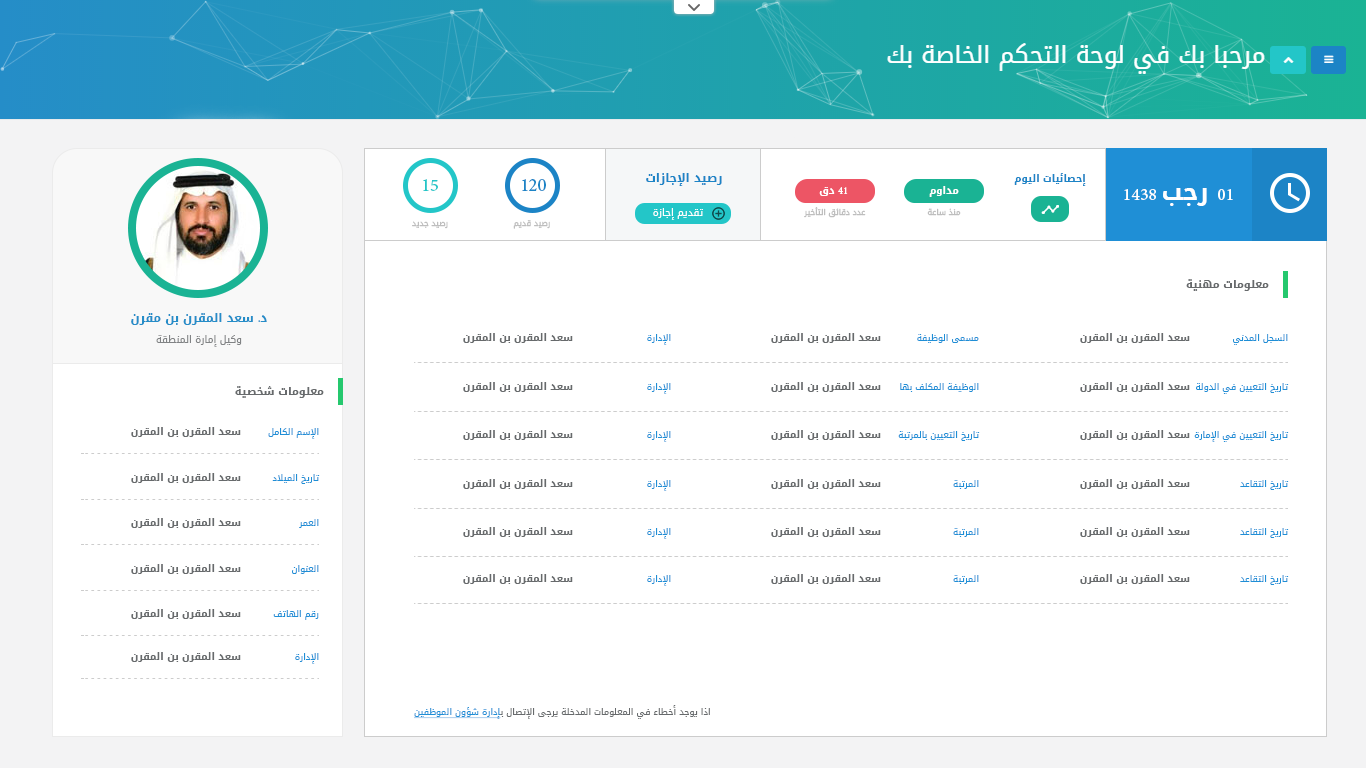
<style>
.page{position:relative;width:1366px;height:768px;background:#ffffff}
.page>*{position:absolute;margin:0}
.t1{font:12px "DroidArabicKufi-Bold";color:#1c84c6}
.t2{font:10px "DroidArabicKufi-Bold";color:#1c84c6}
.t3{font:25px "AdobeArabic-Regular";color:#23c6c8}
.t4{font:25px "AdobeArabic-Regular";color:#1c84c6}
.t5{font:10px "DroidArabicKufi-Bold";color:#ffffff}
.t6{font:14px "AdobeArabic-Regular";color:#ffffff}
.t7{font:24px "AdobeArabic-Regular";color:#ffffff}
.t8{font:24px "DroidArabicKufi-Bold";color:#ffffff}
.t9{font:10px "DroidArabicKufi";color:#ffffff}
.t10{font:8px "DroidArabicKufi";color:#bebebe}
.t11{font:11px "DroidArabicKufi-Bold";color:#676a6c}
.t12{font:12px "DroidArabicKufi-Bold";color:#258dc8}
.t13{font:12px "MyriadPro-Regular";color:#258dc8}
.t14{font:10px "DroidArabicKufi";color:#818385}
.t15{font:10px "DroidArabicKufi-Bold";color:#676a6c}
.t16{font:9px "DroidArabicKufi";color:#1f8fd6}
.t17{font:9px "DroidArabicKufi";color:#676a6c}
.t18{font:9px "DroidArabicKufi";color:#1f8fd6;text-decoration:underline}
</style>
<div class="page">
<p class="t1" style="left:646px;top:173px;width:76px;height:13px">رصيد الإجازات</p>
<p class="t2" style="left:1014px;top:173px;width:72px;height:13px">إحصائيات اليوم</p>
<p class="t3" style="left:423px;top:179px;width:15px;height:12px">15</p>
<p class="t4" style="left:522px;top:179px;width:24px;height:12px">120</p>
<p class="t5" style="left:819px;top:187px;width:16px;height:9px">دق</p>
<p class="t6" style="left:838px;top:187px;width:10px;height:7px">41</p>
<p class="t5" style="left:929px;top:186px;width:30px;height:11px">مداوم</p>
<p class="t7" style="left:1124px;top:189px;width:32px;height:11px">1438</p>
<p class="t8" style="left:1163px;top:188px;width:44px;height:18px">رجب</p>
<p class="t7" style="left:1218px;top:189px;width:15px;height:11px">01</p>
<p class="t9" style="left:653px;top:208px;width:50px;height:12px">تقديم إجازة</p>
<p class="t10" style="left:804px;top:207px;width:62px;height:11px">عدد دقائق التأخير</p>
<p class="t10" style="left:927px;top:208px;width:34px;height:8px">منذ ساعة</p>
<p class="t10" style="left:412px;top:221px;width:36px;height:8px">رصيد جديد</p>
<p class="t10" style="left:513px;top:220px;width:37px;height:9px">رصيد قديم</p>
<p class="t11" style="left:1186px;top:279px;width:83px;height:12px">معلومات مهنية</p>
<p class="t12" style="left:131px;top:313px;width:136px;height:12px">د<span class="t13">.</span> سعد المقرن بن مقرن</p>
<p class="t14" style="left:156px;top:335px;width:86px;height:12px">وكيل إمارة المنطقة</p>
<p class="t15" style="left:463px;top:333px;width:110px;height:10px">سعد المقرن بن المقرن</p>
<p class="t16" style="left:647px;top:334px;width:24px;height:11px">الإدارة</p>
<p class="t15" style="left:771px;top:333px;width:110px;height:10px">سعد المقرن بن المقرن</p>
<p class="t16" style="left:917px;top:334px;width:62px;height:9px">مسمى الوظيفة</p>
<p class="t15" style="left:1080px;top:333px;width:110px;height:10px">سعد المقرن بن المقرن</p>
<p class="t16" style="left:1233px;top:334px;width:55px;height:11px">السجل المدني</p>
<p class="t11" style="left:235px;top:386px;width:89px;height:12px">معلومات شخصية</p>
<p class="t15" style="left:463px;top:382px;width:110px;height:10px">سعد المقرن بن المقرن</p>
<p class="t16" style="left:647px;top:383px;width:24px;height:11px">الإدارة</p>
<p class="t15" style="left:771px;top:382px;width:110px;height:10px">سعد المقرن بن المقرن</p>
<p class="t16" style="left:900px;top:383px;width:79px;height:9px">الوظيفة المكلف بها</p>
<p class="t15" style="left:1080px;top:382px;width:110px;height:10px">سعد المقرن بن المقرن</p>
<p class="t16" style="left:1196px;top:383px;width:93px;height:11px">تاريخ التعيين في الدولة</p>
<p class="t15" style="left:131px;top:427px;width:110px;height:10px">سعد المقرن بن المقرن</p>
<p class="t16" style="left:268px;top:428px;width:51px;height:11px">الإسم الكامل</p>
<p class="t15" style="left:463px;top:430px;width:110px;height:10px">سعد المقرن بن المقرن</p>
<p class="t16" style="left:647px;top:431px;width:24px;height:11px">الإدارة</p>
<p class="t15" style="left:771px;top:430px;width:110px;height:10px">سعد المقرن بن المقرن</p>
<p class="t16" style="left:898px;top:431px;width:82px;height:10px">تاريخ التعيين بالمرتبة</p>
<p class="t15" style="left:1080px;top:430px;width:110px;height:10px">سعد المقرن بن المقرن</p>
<p class="t16" style="left:1194px;top:431px;width:95px;height:11px">تاريخ التعيين في الإمارة</p>
<p class="t15" style="left:131px;top:473px;width:110px;height:10px">سعد المقرن بن المقرن</p>
<p class="t16" style="left:272px;top:474px;width:48px;height:10px">تاريخ الميلاد</p>
<p class="t15" style="left:463px;top:479px;width:110px;height:10px">سعد المقرن بن المقرن</p>
<p class="t16" style="left:647px;top:480px;width:24px;height:11px">الإدارة</p>
<p class="t15" style="left:771px;top:479px;width:110px;height:10px">سعد المقرن بن المقرن</p>
<p class="t16" style="left:953px;top:480px;width:26px;height:9px">المرتبة</p>
<p class="t15" style="left:1080px;top:479px;width:110px;height:10px">سعد المقرن بن المقرن</p>
<p class="t16" style="left:1240px;top:480px;width:49px;height:10px">تاريخ التقاعد</p>
<p class="t15" style="left:131px;top:518px;width:110px;height:10px">سعد المقرن بن المقرن</p>
<p class="t16" style="left:299px;top:519px;width:20px;height:9px">العمر</p>
<p class="t15" style="left:463px;top:527px;width:110px;height:10px">سعد المقرن بن المقرن</p>
<p class="t16" style="left:647px;top:528px;width:24px;height:11px">الإدارة</p>
<p class="t15" style="left:771px;top:527px;width:110px;height:10px">سعد المقرن بن المقرن</p>
<p class="t16" style="left:953px;top:528px;width:26px;height:9px">المرتبة</p>
<p class="t15" style="left:1080px;top:527px;width:110px;height:10px">سعد المقرن بن المقرن</p>
<p class="t16" style="left:1240px;top:528px;width:49px;height:10px">تاريخ التقاعد</p>
<p class="t15" style="left:131px;top:564px;width:110px;height:10px">سعد المقرن بن المقرن</p>
<p class="t16" style="left:292px;top:565px;width:27px;height:9px">العنوان</p>
<p class="t15" style="left:463px;top:574px;width:110px;height:10px">سعد المقرن بن المقرن</p>
<p class="t16" style="left:647px;top:575px;width:24px;height:11px">الإدارة</p>
<p class="t15" style="left:771px;top:574px;width:110px;height:10px">سعد المقرن بن المقرن</p>
<p class="t16" style="left:953px;top:575px;width:26px;height:9px">المرتبة</p>
<p class="t15" style="left:1080px;top:574px;width:110px;height:10px">سعد المقرن بن المقرن</p>
<p class="t16" style="left:1240px;top:575px;width:49px;height:10px">تاريخ التقاعد</p>
<p class="t15" style="left:131px;top:609px;width:110px;height:10px">سعد المقرن بن المقرن</p>
<p class="t16" style="left:273px;top:610px;width:46px;height:10px">رقم الهاتف</p>
<p class="t15" style="left:131px;top:652px;width:110px;height:10px">سعد المقرن بن المقرن</p>
<p class="t16" style="left:295px;top:653px;width:24px;height:11px">الإدارة</p>
<p class="t17" style="left:414px;top:705px;width:296px;height:14px">اذا يوجد أخطاء في المعلومات المدخلة يرجى الإتصال ب<span class="t18">إدارة شؤون الموظفين</span></p>
</div>
